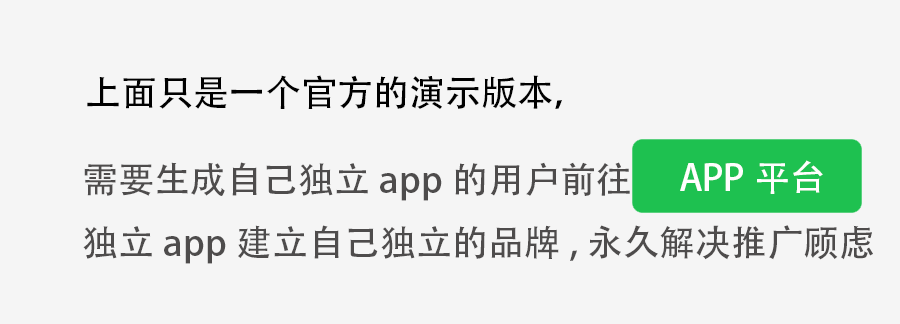
<style>
.page{position:relative;width:900px;height:324px;background:#f5f5f5}
.page>*{position:absolute;margin:0}
.t1{font:36px "AdobeHeitiStd-Regular";color:#000000}
.t2{font:36px "AdobeHeitiStd-Regular";color:#fffefe}
.t3{font:36px "AdobeHeitiStd-Regular";color:#4e4c4c}
</style>
<div class="page">
<p class="t1" style="left:87px;top:75px;width:475px;height:34px">上面只是一个官方的演示版本，</p>
<p class="t2" style="left:680px;top:160px;width:143px;height:34px">APP平台</p>
<p class="t3" style="left:83px;top:162px;width:790px;height:102px">需要生成自己独立app的用户前往<br>独立app建立自己独立的品牌,永久解决推广顾虑</p>
</div>
